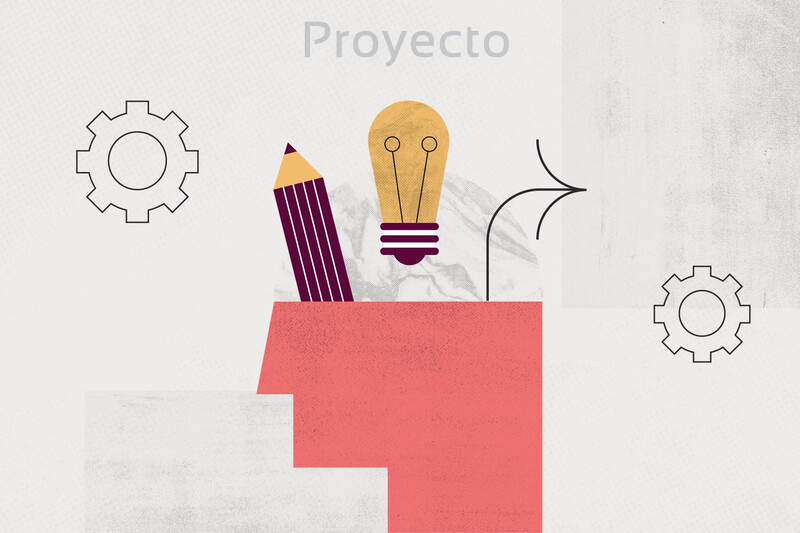
<style>
.page{position:relative;width:800px;height:533px;background:#edecea}
.page>*{position:absolute;margin:0}
.t1{font:50px "Sansation-Regular";color:#c6c7ca;font-weight:bold}
</style>
<div class="page">
<p class="t1" style="left:304px;top:21px;width:205px;height:46px">Proyecto</p>
</div>
